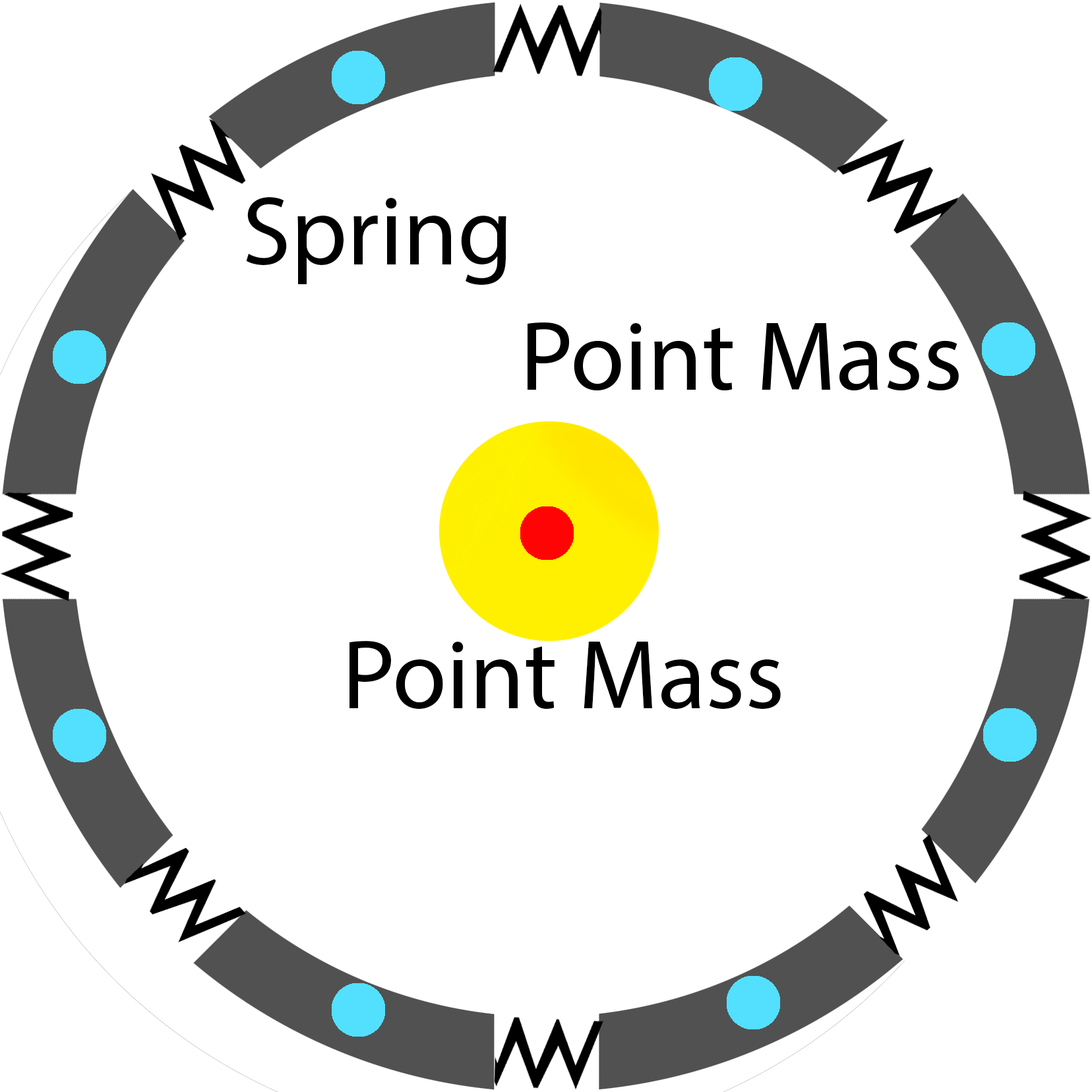
<style>
.page{position:relative;width:1092px;height:1092px;background:#ffffff}
.page>*{position:absolute;margin:0}
.t1{font:98.9px "MyriadPro-Regular";color:#000000}
</style>
<div class="page">
<p class="t1" style="left:246px;top:197px;width:260px;height:88px">Spring</p>
<p class="t1" style="left:349px;top:641px;width:432px;height:69px">Point Mass</p>
</div>
